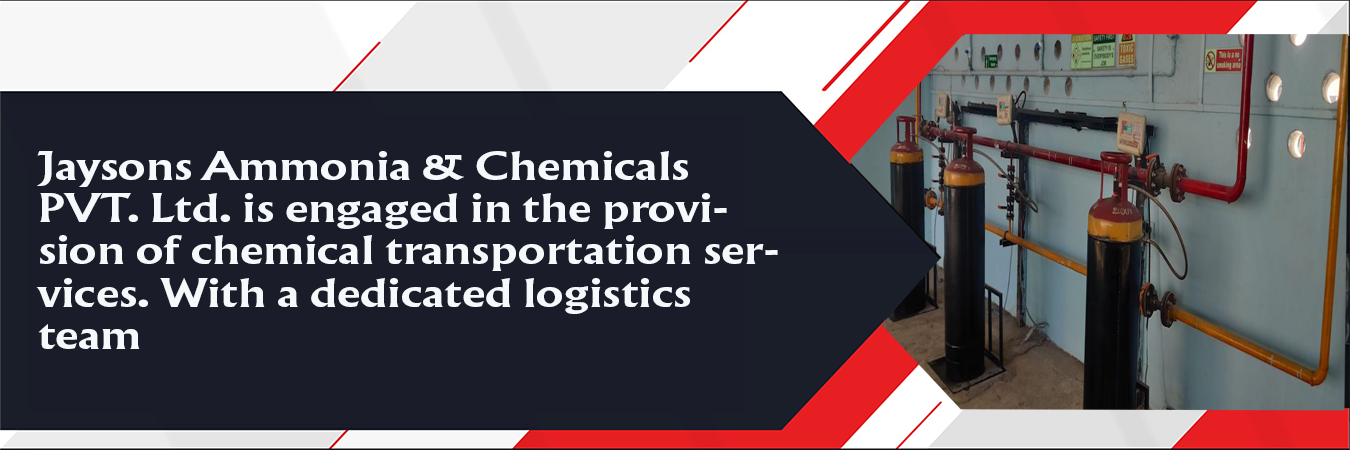
<style>
.page{position:relative;width:1350px;height:450px;background:#1a1c29}
.page>*{position:absolute;margin:0}
.t1{font:35.3px "AlbertusNova-Bold";color:#f6f9fb;scale:1.26 1}
</style>
<div class="page">
<p class="t1" style="left:36px;top:151px;width:742px;height:198px">Jaysons Ammonia &amp; Chemicals PVT. Ltd. is engaged in the provision of chemical transportation services. With a dedicated logistics team</p>
</div>
